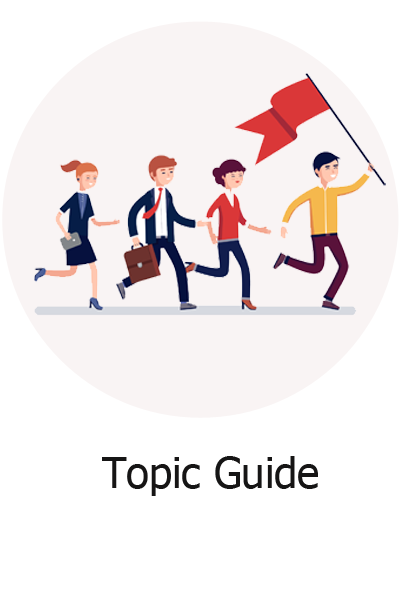
<style>
.page{position:relative;width:400px;height:600px;background:#ffffff}
.page>*{position:absolute;margin:0}
.t1{font:41.7px "Tahoma";color:#161515}
</style>
<div class="page">
<p class="t1" style="left:102px;top:456px;width:216px;height:40px">Topic Guide</p>
</div>
